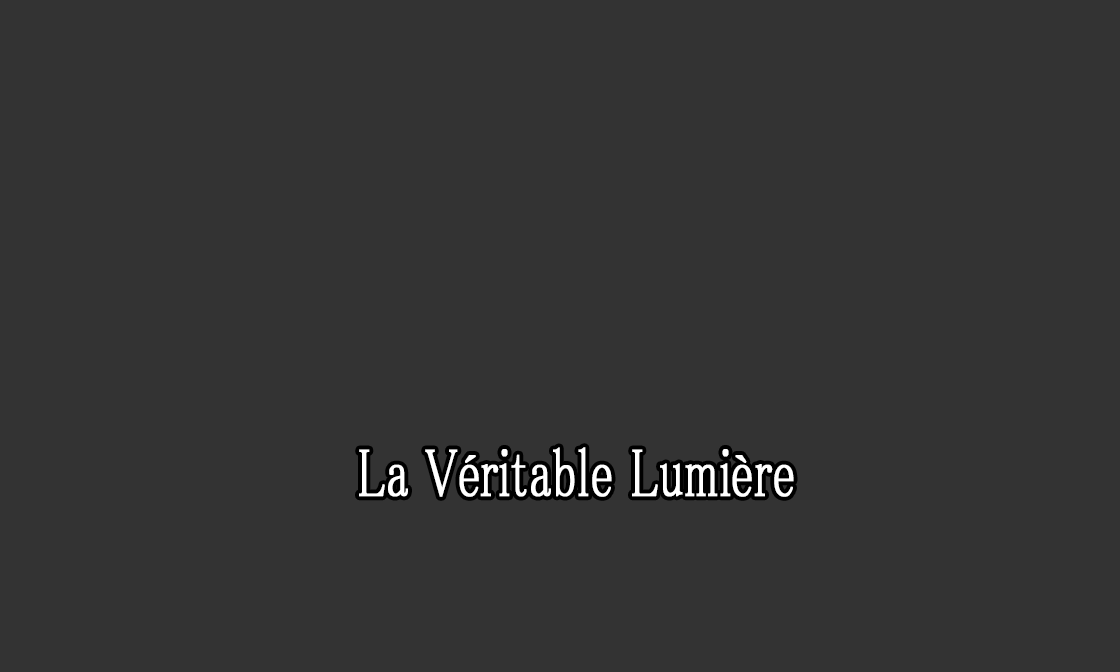
<style>
.page{position:relative;width:1120px;height:672px;background:#333333}
.page>*{position:absolute;margin:0}
.t1{font:68.6px "MS-PMincho";color:#ffffff;font-weight:bold;scale:0.69 1}
</style>
<div class="page">
<p class="t1" style="left:359px;top:447px;width:435px;height:50px">La Véritable Lumière</p>
</div>
